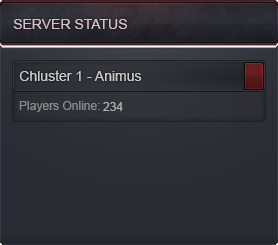
<style>
.page{position:relative;width:278px;height:245px}
.page>*{position:absolute;margin:0}
.t1{font:14px "ArialMT";color:#dac1c9}
.t2{font:14px "ArialMT";color:#cacaca}
.t3{font:12px "ArialMT";color:#8b8b8b}
.t4{font:12px "ArialMT";color:#b0b0b0}
</style>
<div class="page">
<p class="t1" style="left:13px;top:19px;width:114px;height:10px">SERVER STATUS</p>
<p class="t2" style="left:19px;top:70px;width:123px;height:11px">Chluster 1 - Animus</p>
<p class="t3" style="left:19px;top:101px;width:81px;height:11px">Players Online:</p>
<p class="t4" style="left:103px;top:102px;width:20px;height:9px">234</p>
</div>
